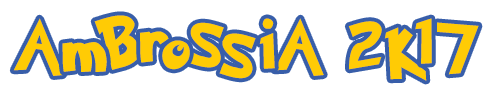
<style>
.page{position:relative;width:500px;height:100px;background:#ffffff}
.page>*{position:absolute;margin:0}
.t1{font:60px "PokemonSolidNormal";color:#ffcb05}
.t2{font:49px "PokemonSolidNormal";color:#ffcb05}
</style>
<div class="page">
<p class="t1" style="left:94px;top:15px;width:46px;height:55px">B</p>
<p class="t2" style="left:13px;top:18px;width:51px;height:58px">A</p>
<p class="t2" style="left:187px;top:22px;width:37px;height:46px">S</p>
<p class="t2" style="left:259px;top:18px;width:16px;height:51px">i</p>
<p class="t2" style="left:274px;top:18px;width:50px;height:58px">A</p>
<p class="t2" style="left:348px;top:21px;width:34px;height:49px">2</p>
<p class="t2" style="left:384px;top:27px;width:43px;height:54px">K</p>
<p class="t2" style="left:415px;top:18px;width:17px;height:46px">1</p>
<p class="t2" style="left:437px;top:22px;width:42px;height:53px">7</p>
<p class="t2" style="left:139px;top:31px;width:30px;height:32px">r</p>
<p class="t2" style="left:162px;top:40px;width:28px;height:30px">o</p>
<p class="t2" style="left:219px;top:33px;width:37px;height:46px">S</p>
<p class="t2" style="left:62px;top:42px;width:45px;height:30px">m</p>
</div>
